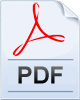
<style>
.page{position:relative;width:80px;height:100px;background:#edf1f9}
.page>*{position:absolute;margin:0}
.t1{font:23.9px "Arial-BoldMT";letter-spacing:-0.005em}
</style>
<div class="page">
<p class="t1" style="left:18px;top:66px;width:45px;height:18px">PDF</p>
</div>
